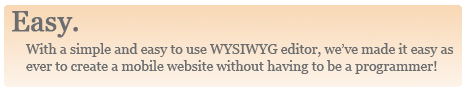
<style>
.page{position:relative;width:468px;height:92px}
.page>*{position:absolute;margin:0}
.t1{font:28px "Georgia";letter-spacing:-0.005em;color:#6c6d6f;font-weight:bold}
.t2{font:14px "Georgia";letter-spacing:-0.005em;color:#6c6d6f}
</style>
<div class="page">
<p class="t1" style="left:12px;top:11px;width:66px;height:27px">Easy.</p>
<p class="t2" style="left:25px;top:43px;width:429px;height:31px">With a simple and easy to use WYSIWYG editor, we’ve made it easy as <br>ever to create a mobile website without having to be a programmer!</p>
</div>
